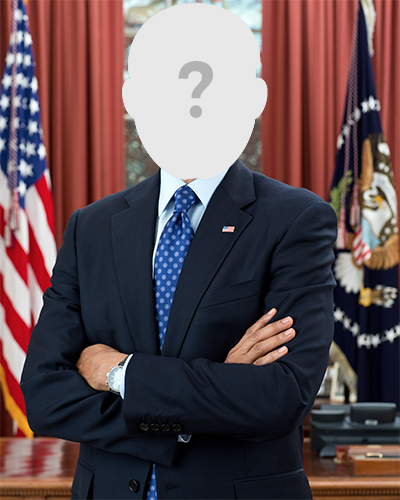
<style>
.page{position:relative;width:400px;height:500px}
.page>*{position:absolute;margin:0}
.t1{font:80px "Montserrat-SemiBold";color:#b2b2b2}
</style>
<div class="page">
<p class="t1" style="left:178px;top:61px;width:35px;height:57px">?</p>
</div>
